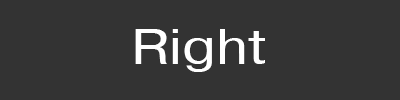
<style>
.page{position:relative;width:400px;height:100px;background:#333333}
.page>*{position:absolute;margin:0}
.t1{font:48px "Helvetica";color:#ffffff;scale:1.2 1}
</style>
<div class="page">
<p class="t1" style="left:135px;top:29px;width:130px;height:43px">Right</p>
</div>
